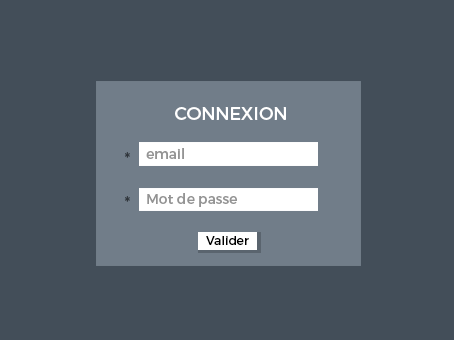
<style>
.page{position:relative;width:454px;height:340px;background:#434e59}
.page>*{position:absolute;margin:0}
.t1{font:18.2px "Montserrat-Regular";color:#ffffff}
.t2{font:13.6px "Montserrat-Regular";color:#949494}
.t3{font:18.2px "Montserrat-Regular";color:#2f353b;scale:0.95 1}
.t4{font:11.8px "Montserrat-Regular";color:#000000;scale:1.05 1}
</style>
<div class="page">
<p class="t1" style="left:175px;top:107px;width:111px;height:13px">CONNEXION</p>
<p class="t2" style="left:146px;top:148px;width:38px;height:11px">email</p>
<p class="t3" style="left:124px;top:152px;width:6px;height:6px">*</p>
<p class="t3" style="left:124px;top:196px;width:6px;height:6px">*</p>
<p class="t2" style="left:147px;top:193px;width:90px;height:14px">Mot de passe</p>
<p class="t4" style="left:206px;top:236px;width:43px;height:9px">Valider</p>
</div>
